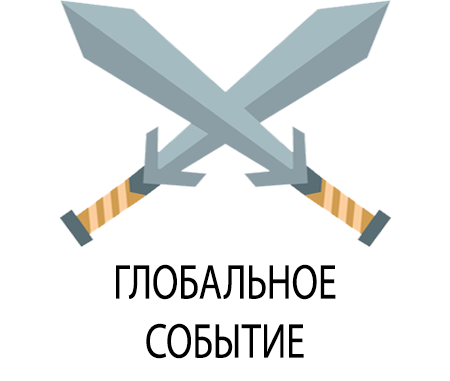
<style>
.page{position:relative;width:450px;height:381px;background:#ffffff}
.page>*{position:absolute;margin:0}
.t1{font:49.2px "MyriadPro-Regular";color:#000000;text-transform:uppercase;scale:0.78 1}
</style>
<div class="page">
<p class="t1" style="left:116px;top:264px;width:220px;height:95px;text-align:center">Глобальное <br>событие</p>
</div>
